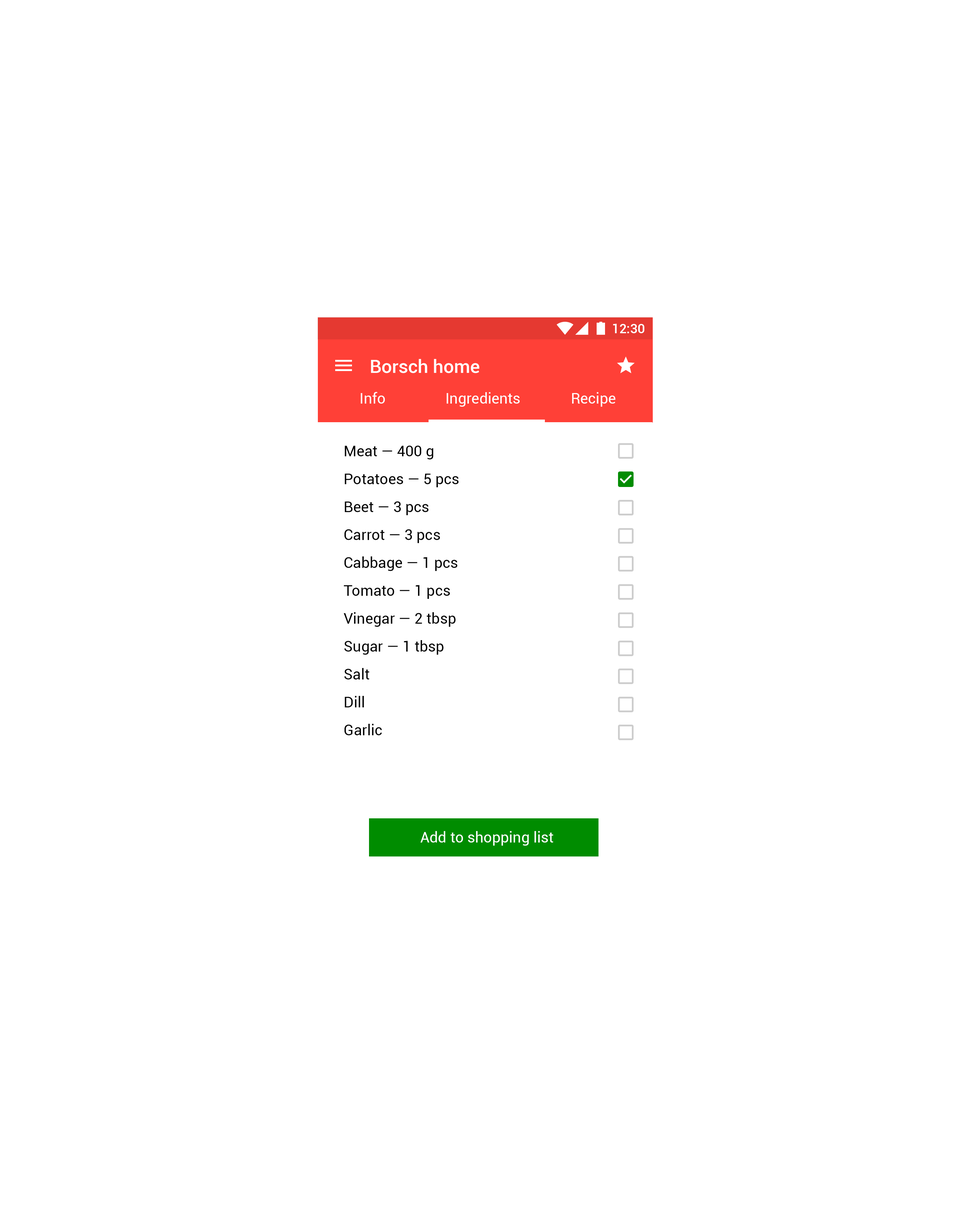
<style>
.page{position:relative;width:970px;height:1230px;background:#ffffff}
.page>*{position:absolute;margin:0}
.t1{font:13px "Roboto-Medium";color:#ffffff}
.t2{font:18.6px "Roboto-Medium";color:#ffffff}
.t3{font:14.9px "Roboto-Regular";color:#ffffff}
.t4{font:14.9px/27.9px "Roboto-Regular";color:#000000}
</style>
<div class="page">
<p class="t1" style="left:613px;top:324px;width:31px;height:9px">12:30</p>
<p class="t2" style="left:371px;top:359px;width:108px;height:14px">Borsch home</p>
<p class="t3" style="left:360px;top:392px;width:25px;height:12px">Info</p>
<p class="t3" style="left:446px;top:392px;width:73px;height:15px">Ingredients</p>
<p class="t3" style="left:572px;top:392px;width:43px;height:15px">Recipe</p>
<p class="t4" style="left:343px;top:445px;width:115px;height:290px">Meat — 400 g<br>Potatoes — 5 pcs<br>Beet — 3 pcs<br>Carrot — 3 pcs<br>Cabbage — 1 pcs<br>Tomato — 1 pcs<br>Vinegar — 2 tbsp <br>Sugar — 1 tbsp <br>Salt<br>Dill<br>Garlic</p>
<p class="t3" style="left:420px;top:831px;width:133px;height:15px">Add to shopping list</p>
</div>
